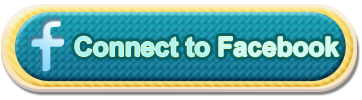
<style>
.page{position:relative;width:362px;height:100px}
.page>*{position:absolute;margin:0}
.t1{font:26.4px "Arial-BoldMT";color:#baf7fb}
</style>
<div class="page">
<p class="t1" style="left:75px;top:36px;width:264px;height:21px">Connect to Facebook</p>
<p class="t1" style="left:75px;top:36px;width:264px;height:21px">Connect to Facebook</p>
</div>
